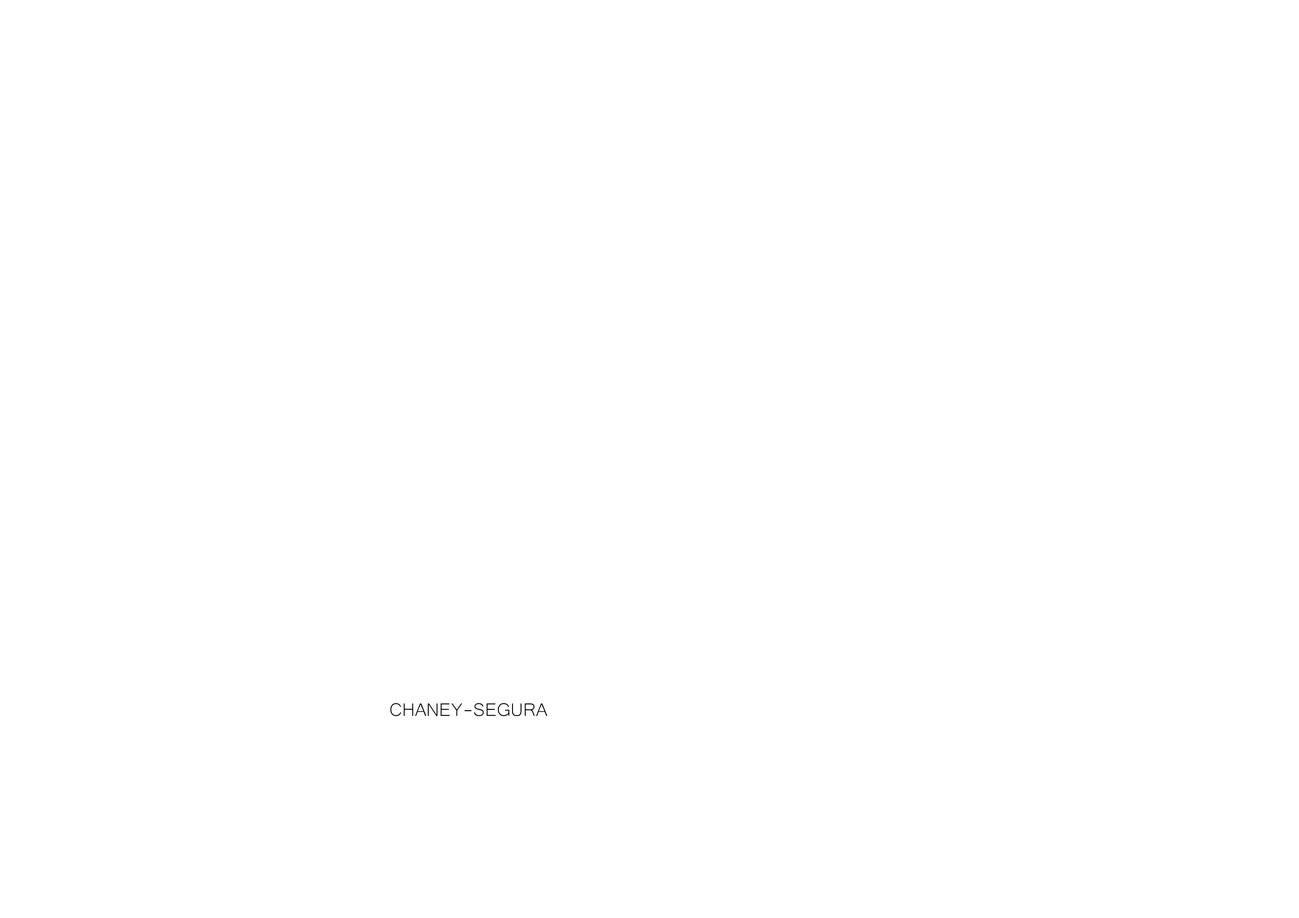
<style>
.page{position:relative;width:1299px;height:918px;background:#ffffff}
.page>*{position:absolute;margin:0}
.t1{font:23.3px "Microsoft-Yi-Baiti";color:#000000}
</style>
<div class="page">
<p class="t1" style="left:390px;top:703px;width:157px;height:14px">CHANEY-SEGURA</p>
</div>
